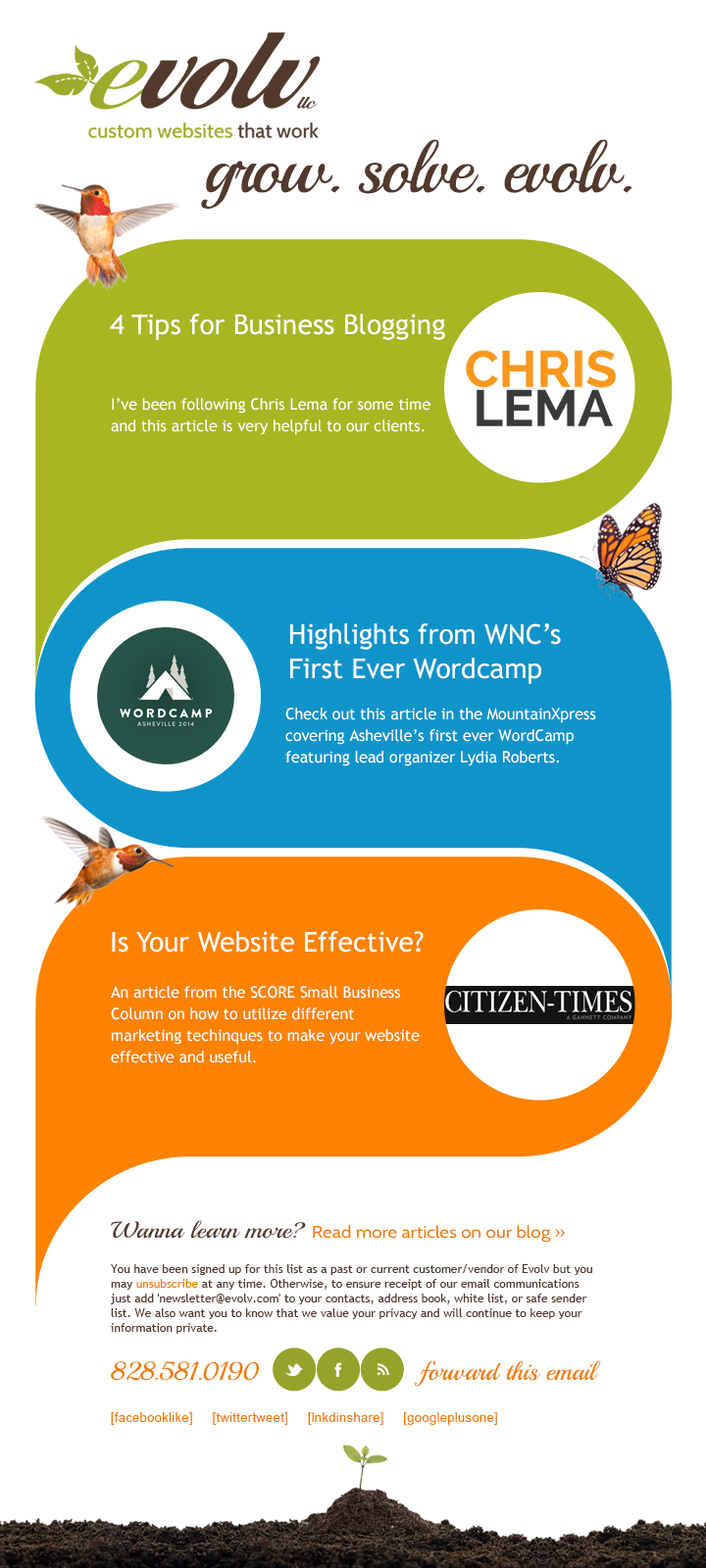
<style>
.page{position:relative;width:706px;height:1568px;background:#ffffff}
.page>*{position:absolute;margin:0}
.t1{font:70.6px "Playball-Regular";letter-spacing:-0.05em;color:#52392c}
.t2{font:27.4px "TrebuchetMS";color:#ffffff}
.t3{font:15.7px/21.6px "TrebuchetMS";color:#ffffff}
.t4{font:27.4px/34.3px "TrebuchetMS";color:#ffffff}
.t5{font:16.8px "Cabin-Regular";color:#f07c00;scale:1.11 1}
.t6{font:22.9px "Playball-Regular";color:#52392c;scale:1.11 1}
.t7{font:11.8px/14.7px "TrebuchetMS";color:#52392c}
.t8{font:11.8px/14.7px "TrebuchetMS";color:#f07c00}
.t9{font:25.5px "Playball-Regular";color:#f07c00}
.t10{font:12.7px "ArialMT";letter-spacing:0.025em;color:#f07c00}
</style>
<div class="page">
<p class="t1" style="left:201px;top:139px;width:431px;height:70px">grow. solve. evolv.</p>
<p class="t2" style="left:110px;top:314px;width:335px;height:26px">4 Tips for Business Blogging</p>
<p class="t3" style="left:111px;top:398px;width:319px;height:37px">I’ve been following Chris Lema for some time and this article is very helpful to our clients.</p>
<p class="t4" style="left:290px;top:623px;width:271px;height:61px">Highlights from WNC’s <br>First Ever Wordcamp</p>
<p class="t3" style="left:285px;top:708px;width:311px;height:58px">Check out this article in the MountainXpress covering Asheville’s first ever WordCamp  featuring lead organizer Lydia Roberts.</p>
<p class="t2" style="left:112px;top:931px;width:311px;height:22px">Is Your Website Effective?</p>
<p class="t3" style="left:111px;top:986px;width:308px;height:77px">An article from the SCORE Small Business Column on how to utilize different marketing techinques to make your website effective and useful.</p>
<p class="t5" style="left:111px;top:1220px;width:453px;height:23px"><span class="t6">Wanna learn more? </span>Read more articles on our blog »</p>
<p class="t7" style="left:111px;top:1264px;width:481px;height:70px">You have been signed up for this list as a past or current customer/vendor of Evolv but you may <span class="t8">unsubscribe </span>at any time. Otherwise, to ensure receipt of our email communications just add 'newsletter@evolv.com' to your contacts, address book, white list, or safe sender list. We also want you to know that we value your privacy and will continue to keep your information private.</p>
<p class="t9" style="left:111px;top:1360px;width:490px;height:27px">828.581.0190                     forward this email</p>
<p class="t10" style="left:111px;top:1412px;width:386px;height:13px">[facebooklike]     [twittertweet]     [lnkdinshare]     [googleplusone]</p>
</div>
